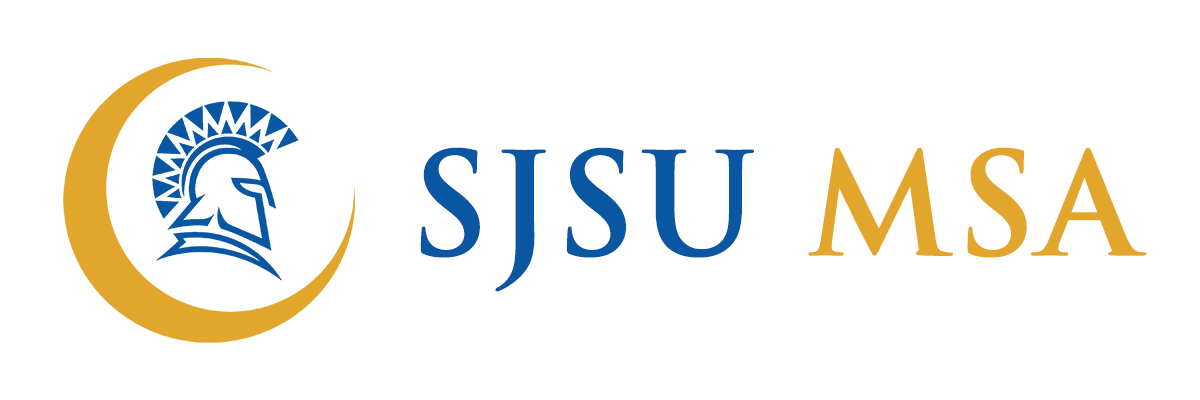
<style>
.page{position:relative;width:1200px;height:400px;background:#ffffff}
.page>*{position:absolute;margin:0}
.t1{font:138.9px "TrajanPro-Bold";color:#0956a3;font-weight:bold}
.t2{font:138.9px "TrajanPro-Bold";color:#e2a62c;font-weight:bold}
</style>
<div class="page">
<p class="t1" style="left:420px;top:147px;width:727px;height:145px">SJSU <span class="t2">MSA</span></p>
</div>
